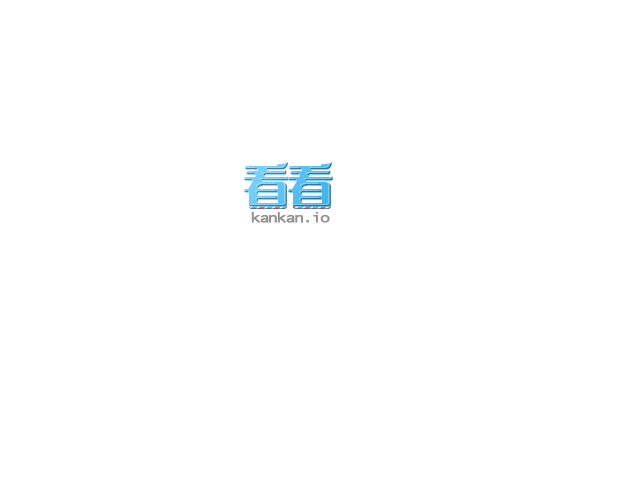
<style>
.page{position:relative;width:640px;height:480px;background:#ffffff}
.page>*{position:absolute;margin:0}
.t1{font:48px "MNgaiHKS-Bold";letter-spacing:-0.1em;font-weight:bold}
.t2{font:14px "AndaleMono";letter-spacing:-0.15em;color:#929292;font-weight:bold;scale:1.3 1}
</style>
<div class="page">
<p class="t1" style="left:244px;top:163px;width:89px;height:44px">看看</p>
<p class="t2" style="left:251px;top:212px;width:79px;height:11px">kankan.io</p>
</div>
